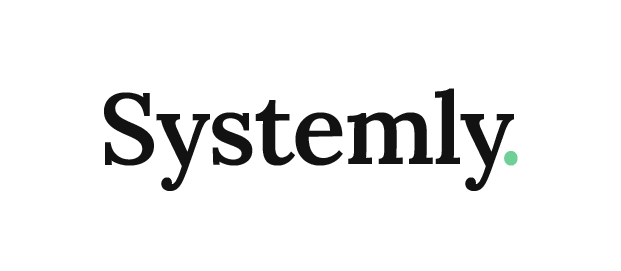
<style>
.page{position:relative;width:621px;height:271px;background:#ffffff}
.page>*{position:absolute;margin:0}
.t1{font:100px "Lora-SemiBold";letter-spacing:-0.02em;color:#121212}
.t2{font:100px "Lora-SemiBold";letter-spacing:-0.12em;color:#121212}
.t3{font:100px "Lora-SemiBold";letter-spacing:-0.12em;color:#6fcf97}
</style>
<div class="page">
<p class="t1" style="left:104px;top:88px;width:414px;height:103px">Systeml<span class="t2">y</span><span class="t3">.</span></p>
</div>
